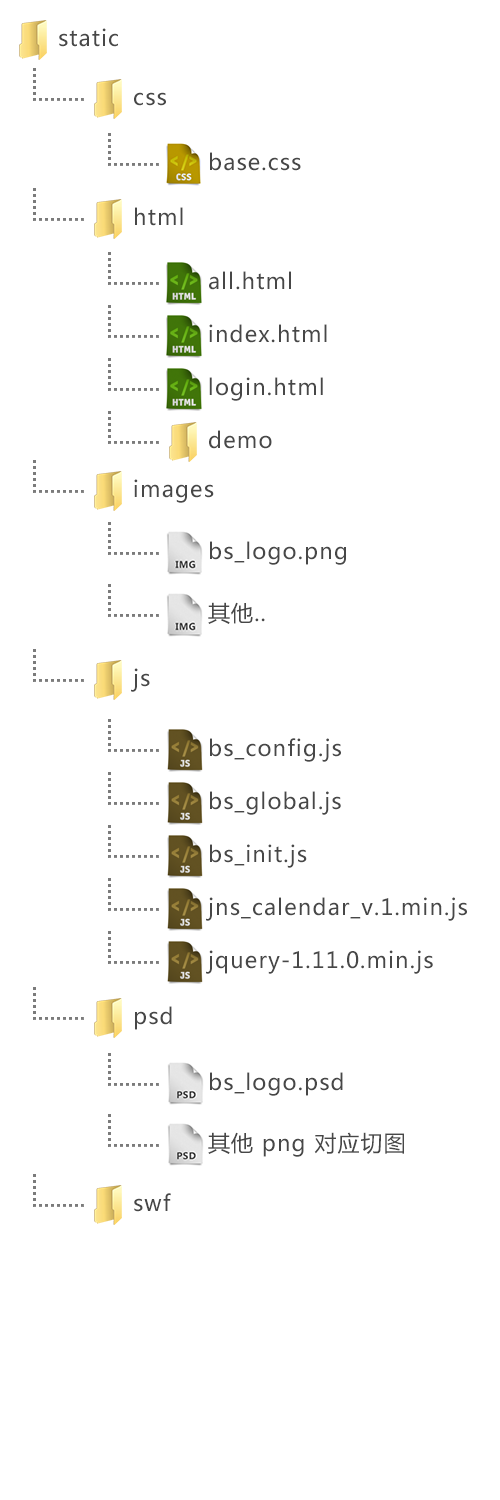
<style>
.page{position:relative;width:500px;height:1500px;background:#ffffff}
.page>*{position:absolute;margin:0}
.t1{font:22px "MicrosoftYaHei";letter-spacing:0.05em;color:#474747}
</style>
<div class="page">
<p class="t1" style="left:59px;top:28px;width:59px;height:19px">static</p>
<p class="t1" style="left:134px;top:92px;width:32px;height:14px">css</p>
<p class="t1" style="left:210px;top:152px;width:91px;height:19px">base.css</p>
<p class="t1" style="left:135px;top:207px;width:48px;height:19px">html</p>
<p class="t1" style="left:209px;top:271px;width:82px;height:19px">all.html</p>
<p class="t1" style="left:209px;top:324px;width:118px;height:19px">index.html</p>
<p class="t1" style="left:209px;top:377px;width:114px;height:24px">login.html</p>
<p class="t1" style="left:209px;top:430px;width:63px;height:19px">demo</p>
<p class="t1" style="left:134px;top:479px;width:80px;height:24px">images</p>
<p class="t1" style="left:210px;top:541px;width:136px;height:24px">bs_logo.png</p>
<p class="t1" style="left:208px;top:602px;width:57px;height:22px">其他..</p>
<p class="t1" style="left:131px;top:668px;width:19px;height:24px">js</p>
<p class="t1" style="left:210px;top:738px;width:131px;height:24px">bs_config.js</p>
<p class="t1" style="left:210px;top:791px;width:131px;height:24px">bs_global.js</p>
<p class="t1" style="left:210px;top:844px;width:97px;height:24px">bs_init.js</p>
<p class="t1" style="left:206px;top:897px;width:261px;height:24px">jns_calendar_v.1.min.js</p>
<p class="t1" style="left:206px;top:950px;width:227px;height:24px">jquery-1.11.0.min.js</p>
<p class="t1" style="left:135px;top:1006px;width:37px;height:24px">psd</p>
<p class="t1" style="left:210px;top:1072px;width:133px;height:24px">bs_logo.psd</p>
<p class="t1" style="left:208px;top:1132px;width:196px;height:25px">其他 png 对应切图</p>
<p class="t1" style="left:134px;top:1193px;width:37px;height:19px">swf</p>
</div>
